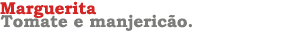
<style>
.page{position:relative;width:300px;height:50px;background:#ffffff}
.page>*{position:absolute;margin:0}
.t1{font:17px "BookmanOldStyle-Bold";color:#d42525}
.t2{font:17px "BookmanOldStyle-Bold";color:#7c7c79}
</style>
<div class="page">
<p class="t1" style="left:0px;top:1px;width:96px;height:17px">Marguerita</p>
<p class="t2" style="left:0px;top:14px;width:192px;height:17px">Tomate e manjericão.</p>
</div>
